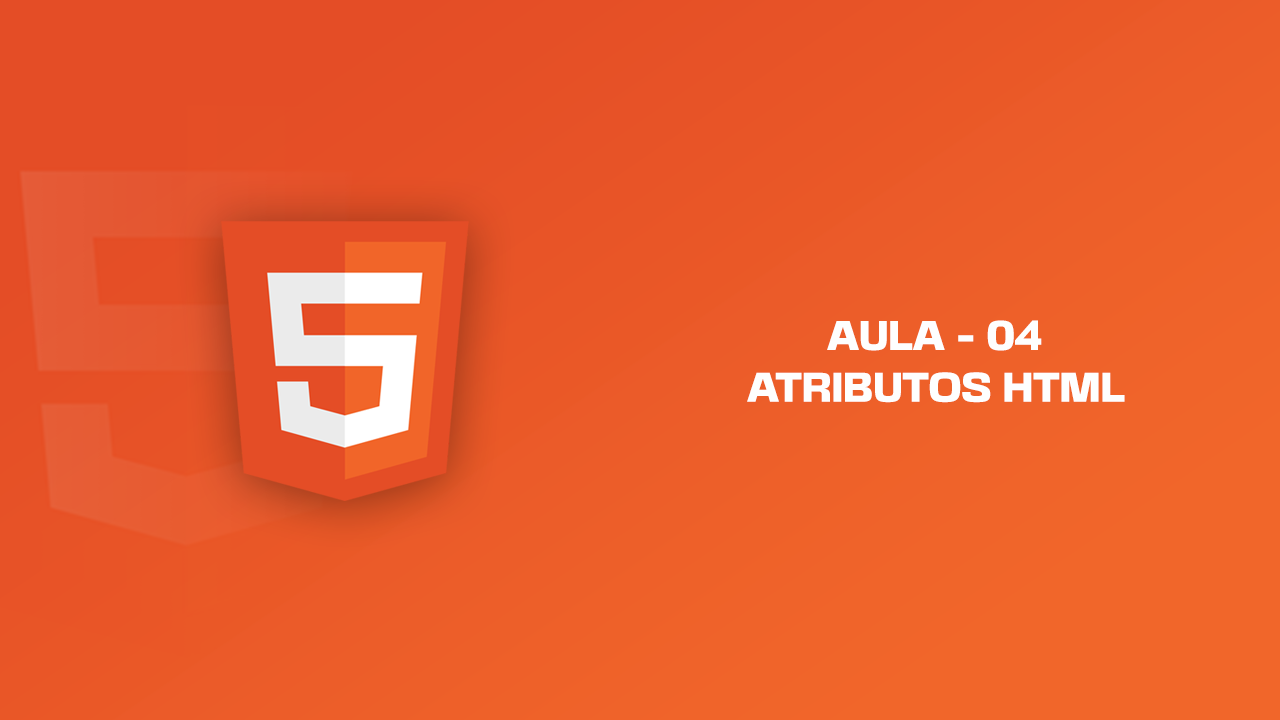
<style>
.page{position:relative;width:1280px;height:720px}
.page>*{position:absolute;margin:0}
.t1{font:37.3px "BasementGrotesque-Black";color:#fefefe;text-transform:uppercase}
</style>
<div class="page">
<p class="t1" style="left:827px;top:320px;width:215px;height:31px">aula - 04</p>
<p class="t1" style="left:747px;top:372px;width:378px;height:31px">Atributos HTML</p>
</div>
